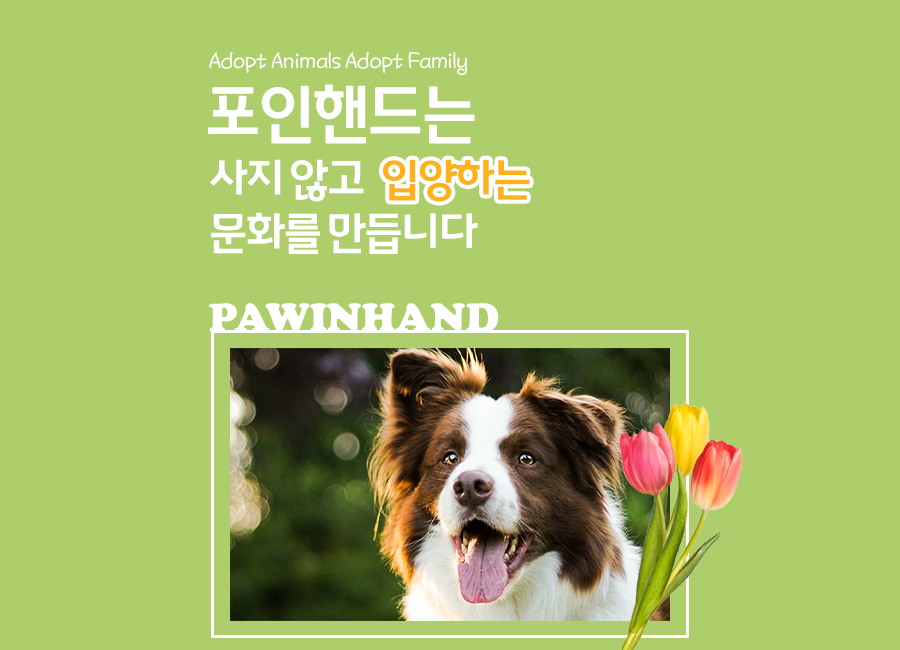
<style>
.page{position:relative;width:900px;height:650px;background:#aece6b}
.page>*{position:absolute;margin:0}
.t1{font:25.5px "KNPSKkomi-Regular";letter-spacing:-0.04em;color:#ffffff}
.t2{font:63.4px "ChungbukNationalUniversity-Bold";letter-spacing:-0.04em;color:#ffffff;text-transform:uppercase}
.t3{font:43.9px/53.7px "ChungbukNationalUniversity-Bold";letter-spacing:-0.04em;color:#ffffff}
.t4{font:43.9px "ChungbukNationalUniversity-Bold";letter-spacing:-0.04em;color:#ffb119}
.t5{font:42px "CooperBlack";color:#ffffff;text-transform:uppercase}
</style>
<div class="page">
<p class="t1" style="left:209px;top:51px;width:258px;height:24px">Adopt Animals Adopt Family</p>
<p class="t2" style="left:208px;top:84px;width:267px;height:60px">포인핸드는</p>
<p class="t3" style="left:210px;top:159px;width:268px;height:95px">사지 않고 <br>문화를 만듭니다</p>
<p class="t4" style="left:383px;top:159px;width:147px;height:43px">입양하는</p>
<p class="t5" style="left:209px;top:303px;width:290px;height:30px">pawinhand</p>
</div>
